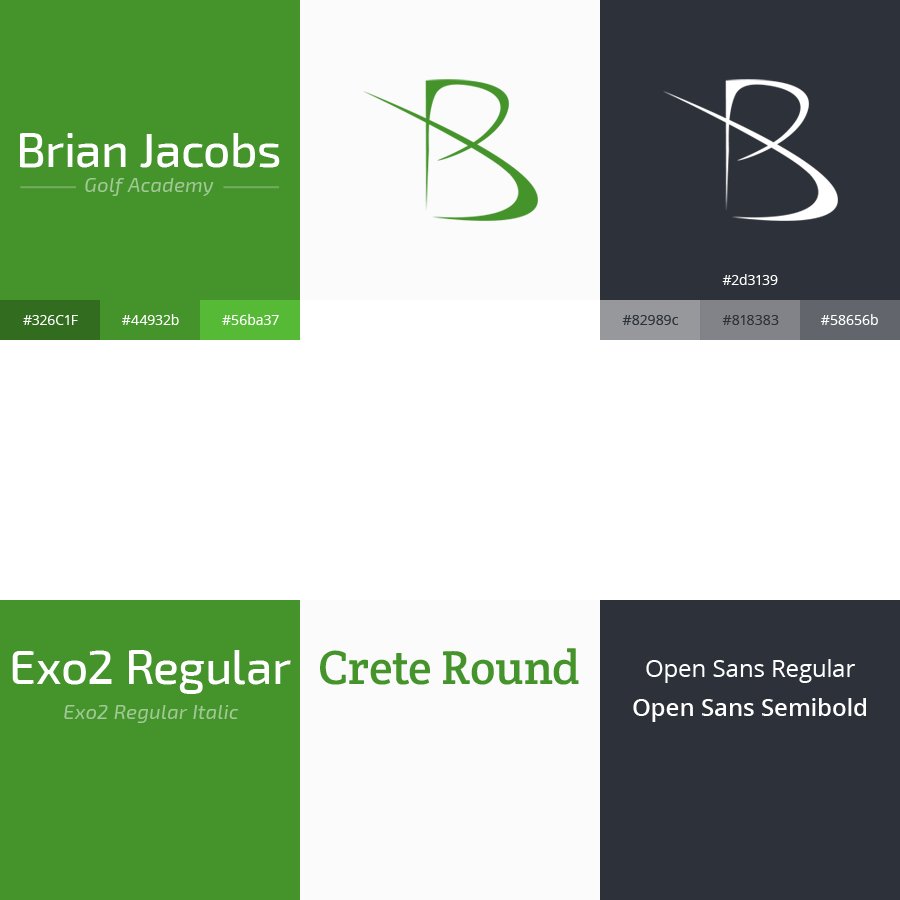
<style>
.page{position:relative;width:900px;height:900px;background:#ffffff}
.page>*{position:absolute;margin:0}
.t1{font:48px "Exo2-Medium";color:#ffffff}
.t2{font:20px "Exo2-Italic";letter-spacing:0.025em;color:#a2c995}
.t3{font:14px "OpenSans";color:#ffffff}
.t4{font:14px "OpenSans";color:#2d3139}
.t5{font:14px "OpenSans";color:#fefefe}
.t6{font:48px "CreteRound-Regular";color:#44932b}
.t7{font:24px "OpenSans";color:#ffffff}
.t8{font:24px "OpenSans-Semibold";color:#ffffff}
</style>
<div class="page">
<p class="t1" style="left:20px;top:133px;width:260px;height:35px">Brian Jacobs</p>
<p class="t2" style="left:85px;top:178px;width:129px;height:18px">Golf Academy</p>
<p class="t3" style="left:722px;top:274px;width:56px;height:11px">#2d3139</p>
<p class="t3" style="left:23px;top:315px;width:55px;height:10px">#326C1F</p>
<p class="t3" style="left:122px;top:314px;width:57px;height:11px">#44932b</p>
<p class="t3" style="left:222px;top:314px;width:57px;height:11px">#56ba37</p>
<p class="t4" style="left:622px;top:315px;width:56px;height:10px">#82989c</p>
<p class="t4" style="left:722px;top:315px;width:57px;height:10px">#818383</p>
<p class="t5" style="left:821px;top:314px;width:57px;height:11px">#58656b</p>
<p class="t1" style="left:12px;top:650px;width:279px;height:44px">Exo2 Regular</p>
<p class="t6" style="left:320px;top:648px;width:259px;height:37px">Crete Round</p>
<p class="t7" style="left:646px;top:659px;width:209px;height:24px">Open Sans Regular</p>
<p class="t8" style="left:633px;top:698px;width:233px;height:24px">Open Sans Semibold</p>
<p class="t2" style="left:64px;top:705px;width:175px;height:18px">Exo2 Regular Italic</p>
</div>
